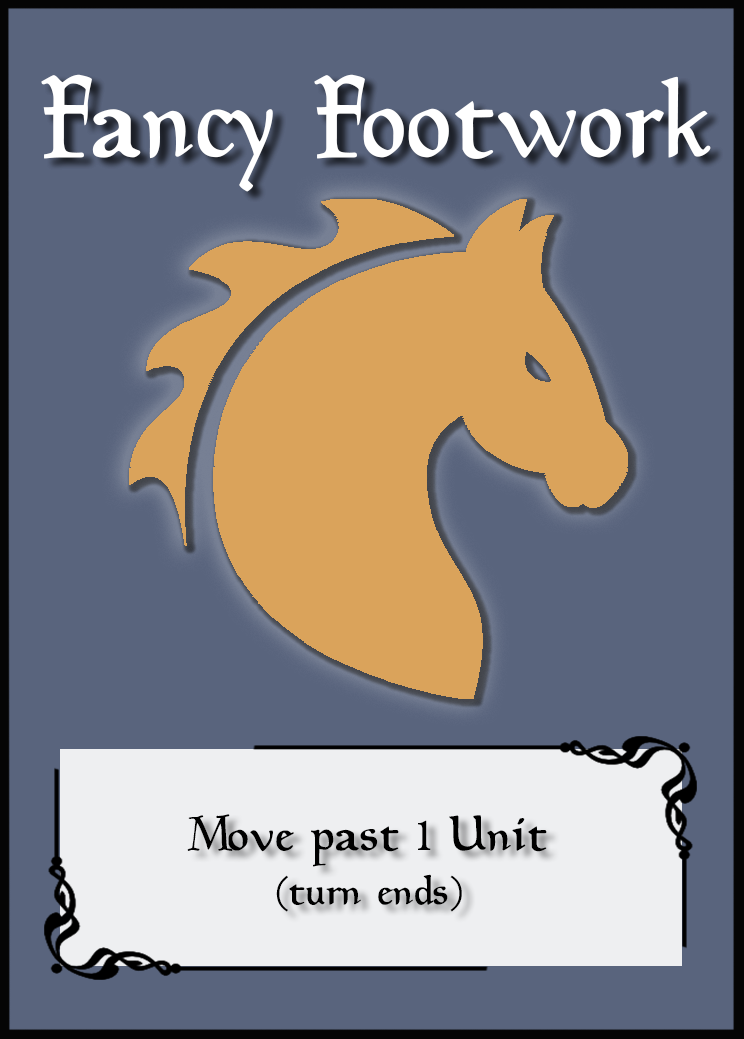
<style>
.page{position:relative;width:744px;height:1039px;background:#59647d}
.page>*{position:absolute;margin:0}
.t1{font:115.7px "Planewalker";color:#ffffff;scale:0.9 1}
.t2{font:50px/54.6px "Planewalker";color:#000000}
.t3{font:41.7px/54.6px "Planewalker";color:#000000}
</style>
<div class="page">
<p class="t1" style="left:41px;top:74px;width:670px;height:118px">Fancy Footwork</p>
<p class="t2" style="left:187px;top:814px;width:360px;height:98px;text-align:center">Move past 1 Unit<br><span class="t3">(turn ends)</span></p>
</div>
